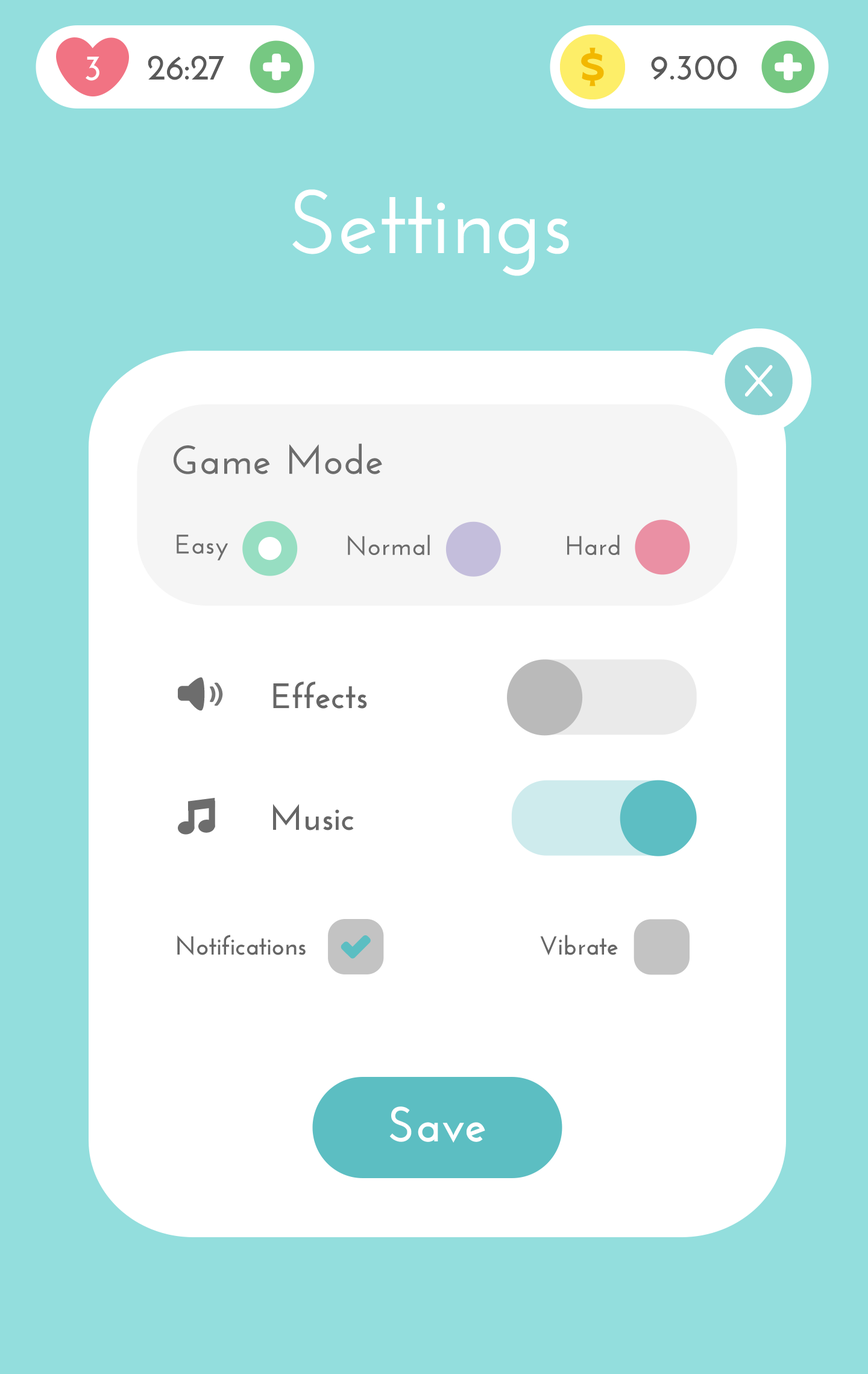
<style>
.page{position:relative;width:868px;height:1374px;background:#93dedd}
.page>*{position:absolute;margin:0}
.t1{font:36.2px "JosefinSans-Bold";color:#ffffff}
.t2{font:36.2px "JosefinSans-Bold";color:#595959}
.t3{font:90.4px "JosefinSans-SemiBold";color:#ffffff}
.t4{font:39.6px "JosefinSans-SemiBold";color:#6c6c6c;font-weight:bold}
.t5{font:26.4px "JosefinSans-SemiBold";color:#6c6c6c;font-weight:bold}
.t6{font:35.3px "JosefinSans-Bold";color:#666666}
.t7{font:26px "JosefinSans-Bold";color:#666666}
.t8{font:49.4px "JosefinSans-Bold";color:#ffffff}
</style>
<div class="page">
<p class="t1" style="left:86px;top:57px;width:13px;height:24px">3</p>
<p class="t2" style="left:148px;top:55px;width:76px;height:25px">26:27</p>
<p class="t2" style="left:651px;top:55px;width:86px;height:25px">9.300</p>
<p class="t3" style="left:292px;top:189px;width:277px;height:87px">Settings</p>
<p class="t4" style="left:174px;top:444px;width:208px;height:30px">Game Mode</p>
<p class="t5" style="left:177px;top:535px;width:51px;height:25px">Easy</p>
<p class="t5" style="left:348px;top:535px;width:82px;height:21px">Normal</p>
<p class="t5" style="left:567px;top:535px;width:53px;height:20px">Hard</p>
<p class="t6" style="left:273px;top:682px;width:94px;height:27px">Effects</p>
<p class="t6" style="left:273px;top:804px;width:81px;height:26px">Music</p>
<p class="t7" style="left:177px;top:935px;width:129px;height:21px">Notifications</p>
<p class="t7" style="left:540px;top:935px;width:78px;height:21px">Vibrate</p>
<p class="t8" style="left:389px;top:1106px;width:96px;height:37px">Save</p>
</div>
